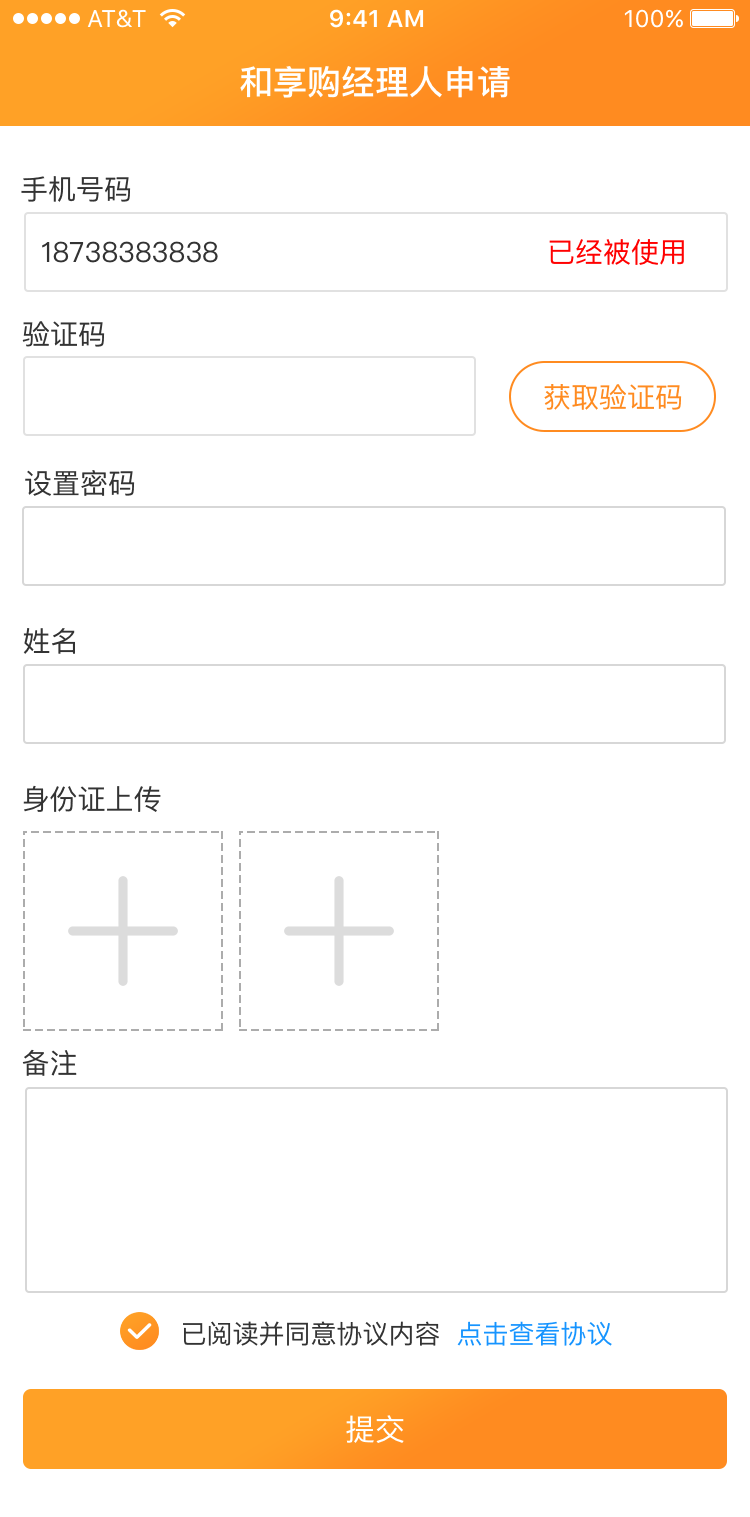
<style>
.page{position:relative;width:750px;height:1517px;background:#ffffff}
.page>*{position:absolute;margin:0}
.t1{font:34px "PingFangSC-Medium";color:#ffffff;text-transform:uppercase}
.t2{font:28px "PingFangSC-Regular";color:#333333;text-transform:uppercase}
.t3{font:28px "PingFangSC-Regular";color:#ff0101;text-transform:uppercase}
.t4{font:28px "PingFangSC-Regular";color:#ff8b20;text-transform:uppercase}
.t5{font:26px "PingFangSC-Regular";color:#333333;text-transform:uppercase}
.t6{font:26px "PingFangSC-Regular";color:#1694ff;text-transform:uppercase}
.t7{font:30px "PingFangSC-Regular";color:#ffffff;text-transform:uppercase}
</style>
<div class="page">
<p class="t1" style="left:240px;top:66px;width:270px;height:32px">和享购经理人申请</p>
<p class="t2" style="left:21px;top:176px;width:110px;height:26px">手机号码</p>
<p class="t2" style="left:42px;top:241px;width:176px;height:22px">18738383838</p>
<p class="t3" style="left:549px;top:239px;width:135px;height:26px">已经被使用</p>
<p class="t2" style="left:22px;top:321px;width:83px;height:26px">验证码</p>
<p class="t4" style="left:544px;top:384px;width:138px;height:26px">获取验证码</p>
<p class="t2" style="left:25px;top:470px;width:110px;height:26px">设置密码</p>
<p class="t2" style="left:23px;top:628px;width:52px;height:26px">姓名</p>
<p class="t2" style="left:23px;top:785px;width:138px;height:27px">身份证上传</p>
<p class="t2" style="left:22px;top:1049px;width:55px;height:27px">备注</p>
<p class="t5" style="left:183px;top:1321px;width:256px;height:25px">已阅读并同意协议内容</p>
<p class="t6" style="left:457px;top:1321px;width:155px;height:25px">点击查看协议</p>
<p class="t7" style="left:346px;top:1415px;width:58px;height:28px">提交</p>
</div>
